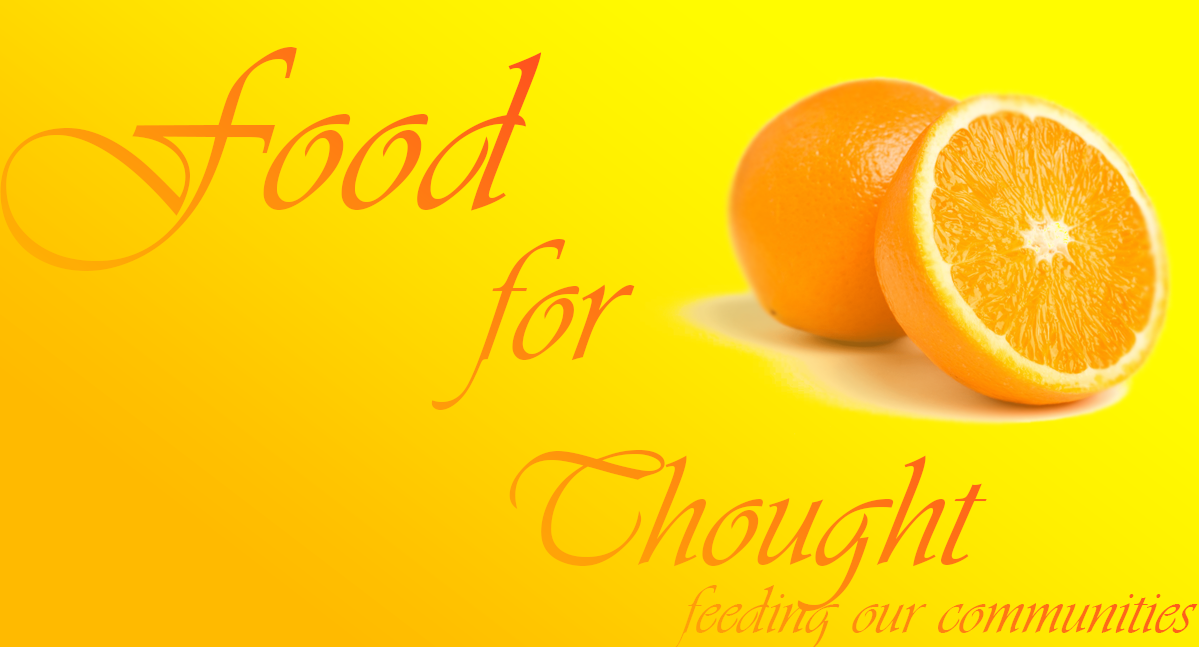
<style>
.page{position:relative;width:1199px;height:647px}
.page>*{position:absolute;margin:0}
.t1{font:235.7px "Vivaldii"}
.t2{font:182.1px "Vivaldii";color:#ff7f12}
.t3{font:165.2px "Vivaldii";color:#ff890f}
</style>
<div class="page">
<p class="t1" style="left:0px;top:47px;width:542px;height:224px">Food</p>
<p class="t2" style="left:431px;top:239px;width:204px;height:171px">for</p>
<p class="t3" style="left:509px;top:450px;width:478px;height:161px">Thought</p>
</div>
